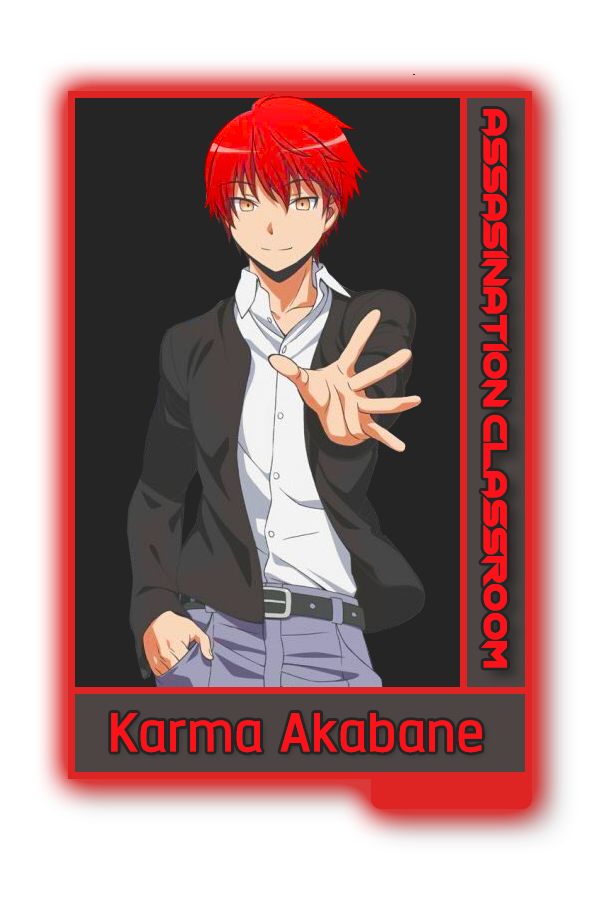
<style>
.page{position:relative;width:600px;height:900px;background:#252525}
.page>*{position:absolute;margin:0}
.t1{font:34px "Chopsic";color:#ff1119}
.t2{font:61.5px "Hurufo&NumeroBold";color:#ff1119}
</style>
<div class="page">
<p class="t1" style="left:481px;top:109px;width:29px;height:559px;rotate:90deg">Assasination Classroom</p>
<p class="t2" style="left:111px;top:713px;width:371px;height:40px">Karma Akabane</p>
</div>
